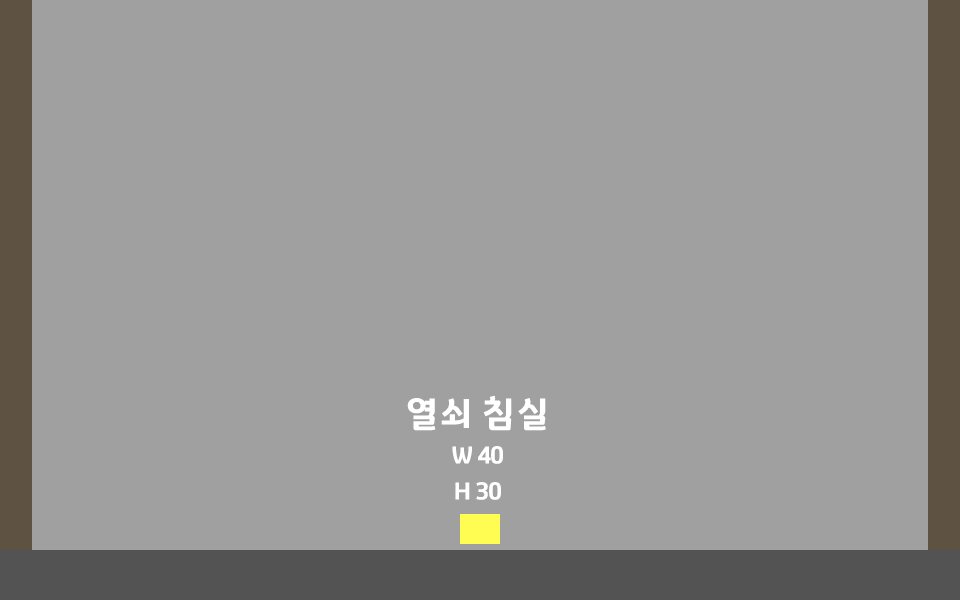
<style>
.page{position:relative;width:960px;height:600px;background:#a0a0a0}
.page>*{position:absolute;margin:0}
.t1{font:24px/36px "GyeonggiTitleV";letter-spacing:-0.05em;color:#ffffff}
.t2{font:36px/12px "GyeonggiTitleV";letter-spacing:-0.05em;color:#ffffff}
</style>
<div class="page">
<p class="t1" style="left:407px;top:395px;width:139px;height:105px;text-align:center"><span class="t2">열쇠 침실<br><br><br><br></span>W 40<br>H 30</p>
</div>
